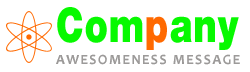
<style>
.page{position:relative;width:250px;height:72px;background:#ffffff}
.page>*{position:absolute;margin:0}
.t1{font:48px "HelveticaNeueLT-Black";letter-spacing:0.01em;color:#07f900;scale:0.78 1}
.t2{font:48px "HelveticaNeueLT-Black";letter-spacing:0.01em;color:#ff6900;scale:0.78 1}
.t3{font:14px "Candara-Bold";letter-spacing:0.1em;color:#9c9a99}
</style>
<div class="page">
<p class="t1" style="left:57px;top:7px;width:182px;height:43px">Com<span class="t2">p</span>any</p>
<p class="t3" style="left:56px;top:54px;width:184px;height:11px">AWESOMENESS MESSAGE</p>
</div>
